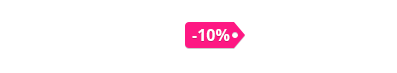
<style>
.page{position:relative;width:397px;height:73px;background:#ffffff}
.page>*{position:absolute;margin:0}
.t1{font:16px "OpenSans-Bold";color:#ffffff}
</style>
<div class="page">
<p class="t1" style="left:192px;top:29px;width:38px;height:12px">-10%</p>
</div>
